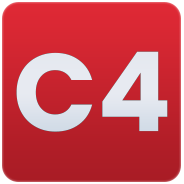
<style>
.page{position:relative;width:184px;height:184px}
.page>*{position:absolute;margin:0}
.t1{font:110px "Poppins-Bold";color:#e4e8ef}
</style>
<div class="page">
<p class="t1" style="left:16px;top:51px;width:152px;height:81px">C4</p>
</div>
